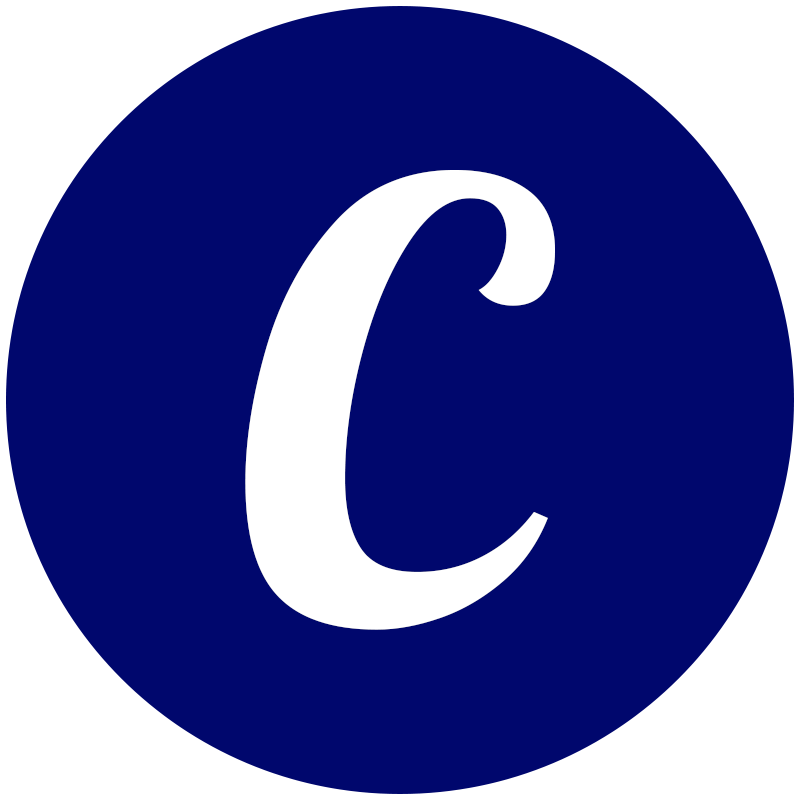
<style>
.page{position:relative;width:800px;height:800px;background:#00076d}
.page>*{position:absolute;margin:0}
.t1{font:600px "Lobster-Regular";color:#ffffff}
</style>
<div class="page">
<p class="t1" style="left:245px;top:170px;width:310px;height:460px">C</p>
</div>
